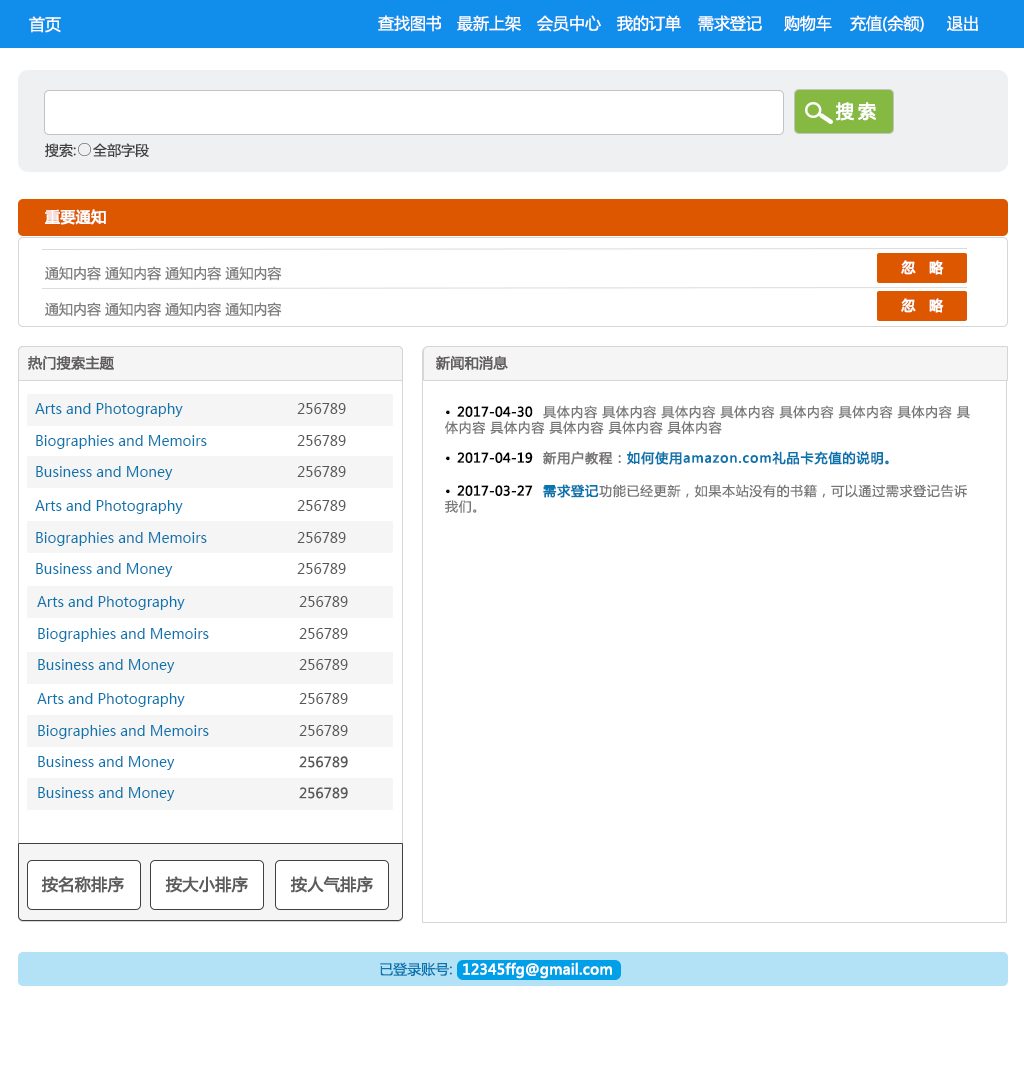
<style>
.page{position:relative;width:1024px;height:1080px;background:#ffffff}
.page>*{position:absolute;margin:0}
.t1{font:16px "MicrosoftYaHei";color:#ffffff}
.t2{font:18px "MicrosoftYaHei";letter-spacing:0.2em;color:#ffffff;font-weight:bold}
.t3{font:14px "MicrosoftYaHei";color:#414040}
.t4{font:15px "MicrosoftYaHei";color:#ffffff;font-weight:bold}
.t5{font:14px "MicrosoftYaHei";color:#7e7e7e}
.t6{font:14px "MicrosoftYaHei";color:#ffffff;font-weight:bold}
.t7{font:14px "MicrosoftYaHei";color:#615e5e;font-weight:bold}
.t8{font:14px "MicrosoftYaHei";color:#0875ae}
.t9{font:14px "MicrosoftYaHei";color:#575757}
.t10{font:13px "MicrosoftYaHei";letter-spacing:0.05em;color:#787676}
.t11{font:13px "MicrosoftYaHei";letter-spacing:0.1em;color:#020202}
.t12{font:13px "MicrosoftYaHei";color:#020202;font-weight:bold}
.t13{font:13px "MicrosoftYaHei";letter-spacing:0.05em;color:#0875ae;font-weight:bold}
.t14{font:13px "MicrosoftYaHei";letter-spacing:0.05em;color:#787676;font-weight:bold}
.t15{font:16px "MicrosoftYaHei";color:#5c5c5c;font-weight:bold}
</style>
<div class="page">
<p class="t1" style="left:29px;top:16px;width:32px;height:17px">首页</p>
<p class="t1" style="left:378px;top:15px;width:64px;height:17px">查找图书</p>
<p class="t1" style="left:457px;top:15px;width:64px;height:17px">最新上架</p>
<p class="t1" style="left:537px;top:15px;width:64px;height:17px">会员中心</p>
<p class="t1" style="left:617px;top:15px;width:64px;height:17px">我的订单</p>
<p class="t1" style="left:698px;top:15px;width:64px;height:17px">需求登记</p>
<p class="t1" style="left:784px;top:15px;width:48px;height:17px">购物车</p>
<p class="t1" style="left:850px;top:15px;width:74px;height:17px">充值(余额)</p>
<p class="t1" style="left:947px;top:15px;width:31px;height:16px">退出</p>
<p class="t2" style="left:835px;top:102px;width:41px;height:19px">搜索</p>
<p class="t3" style="left:45px;top:143px;width:31px;height:15px">搜索:</p>
<p class="t3" style="left:93px;top:143px;width:56px;height:15px">全部字段</p>
<p class="t4" style="left:45px;top:209px;width:61px;height:16px">重要通知</p>
<p class="t5" style="left:45px;top:266px;width:237px;height:15px">通知内容 通知内容 通知内容 通知内容</p>
<p class="t6" style="left:901px;top:260px;width:43px;height:15px">忽   略</p>
<p class="t5" style="left:45px;top:302px;width:237px;height:15px">通知内容 通知内容 通知内容 通知内容</p>
<p class="t6" style="left:901px;top:298px;width:43px;height:15px">忽   略</p>
<p class="t7" style="left:28px;top:355px;width:86px;height:15px">热门搜索主题</p>
<p class="t7" style="left:436px;top:355px;width:72px;height:15px">新闻和消息</p>
<p class="t8" style="left:35px;top:403px;width:148px;height:14px">Arts and Photography</p>
<p class="t9" style="left:297px;top:403px;width:49px;height:11px">256789</p>
<p class="t10" style="left:445px;top:405px;width:525px;height:29px"><span class="t11">• </span><span class="t12">2017-04-30  </span>具体内容 具体内容 具体内容 具体内容 具体内容 具体内容 具体内容 具体内容 具体内容 具体内容 具体内容 具体内容</p>
<p class="t8" style="left:36px;top:435px;width:171px;height:14px">Biographies and Memoirs</p>
<p class="t9" style="left:297px;top:435px;width:49px;height:11px">256789</p>
<p class="t13" style="left:446px;top:451px;width:443px;height:14px"><span class="t11">• </span><span class="t12">2017-04-19  </span><span class="t14">新用户教程：</span>如何使用amazon.com礼品卡充值的说明。</p>
<p class="t8" style="left:36px;top:466px;width:137px;height:14px">Business and Money</p>
<p class="t9" style="left:297px;top:466px;width:49px;height:11px">256789</p>
<p class="t10" style="left:445px;top:484px;width:522px;height:29px"><span class="t11">• </span><span class="t12">2017-03-27  </span><span class="t13">需求登记</span>功能已经更新，如果本站没有的书籍，可以通过需求登记告诉我们。</p>
<p class="t8" style="left:35px;top:500px;width:148px;height:14px">Arts and Photography</p>
<p class="t9" style="left:297px;top:500px;width:49px;height:11px">256789</p>
<p class="t8" style="left:36px;top:532px;width:171px;height:14px">Biographies and Memoirs</p>
<p class="t9" style="left:297px;top:532px;width:49px;height:11px">256789</p>
<p class="t8" style="left:36px;top:563px;width:137px;height:14px">Business and Money</p>
<p class="t9" style="left:297px;top:563px;width:49px;height:11px">256789</p>
<p class="t8" style="left:37px;top:596px;width:148px;height:14px">Arts and Photography</p>
<p class="t9" style="left:299px;top:596px;width:49px;height:11px">256789</p>
<p class="t8" style="left:38px;top:628px;width:171px;height:14px">Biographies and Memoirs</p>
<p class="t9" style="left:299px;top:628px;width:49px;height:11px">256789</p>
<p class="t8" style="left:38px;top:659px;width:137px;height:14px">Business and Money</p>
<p class="t9" style="left:299px;top:659px;width:49px;height:11px">256789</p>
<p class="t8" style="left:37px;top:693px;width:148px;height:14px">Arts and Photography</p>
<p class="t9" style="left:299px;top:693px;width:49px;height:11px">256789</p>
<p class="t8" style="left:38px;top:725px;width:171px;height:14px">Biographies and Memoirs</p>
<p class="t9" style="left:299px;top:725px;width:49px;height:11px">256789</p>
<p class="t8" style="left:38px;top:756px;width:137px;height:14px">Business and Money</p>
<p class="t9" style="left:299px;top:756px;width:49px;height:12px">256789</p>
<p class="t8" style="left:38px;top:787px;width:137px;height:14px">Business and Money</p>
<p class="t9" style="left:299px;top:787px;width:49px;height:12px">256789</p>
<p class="t15" style="left:41px;top:876px;width:83px;height:17px">按名称排序</p>
<p class="t15" style="left:165px;top:876px;width:83px;height:17px">按大小排序</p>
<p class="t15" style="left:290px;top:876px;width:83px;height:17px">按人气排序</p>
<p class="t8" style="left:380px;top:962px;width:72px;height:15px">已登录账号:</p>
<p class="t6" style="left:463px;top:962px;width:149px;height:17px">12345ffg@gmail.com</p>
</div>
